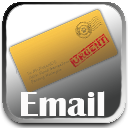
<style>
.page{position:relative;width:128px;height:128px}
.page>*{position:absolute;margin:0}
.t1{font:36px "BritannicBold";color:#fcfbfb}
</style>
<div class="page">
<p class="t1" style="left:21px;top:91px;width:84px;height:25px">Email</p>
</div>
